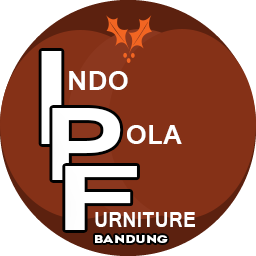
<style>
.page{position:relative;width:256px;height:256px;background:#853117}
.page>*{position:absolute;margin:0}
.t1{font:144.7px "Latha-Bold";color:#ffffff;scale:1.12 1}
.t2{font:30px "Latha-Bold";color:#ffffff}
.t3{font:111.7px "Latha-Bold";color:#ffffff;scale:1.21 1}
.t4{font:98.6px "Latha-Bold";color:#ffffff;scale:1.62 1}
.t5{font:23.8px "Latha-Bold";color:#ffffff;scale:0.88 1}
.t6{font:10.8px "Intro";color:#ffffff;scale:1.32 1}
</style>
<div class="page">
<p class="t1" style="left:41px;top:51px;width:21px;height:93px">I</p>
<p class="t2" style="left:69px;top:71px;width:59px;height:19px">NDO</p>
<p class="t3" style="left:52px;top:108px;width:69px;height:72px">P</p>
<p class="t2" style="left:127px;top:125px;width:55px;height:19px">OLA</p>
<p class="t4" style="left:65px;top:166px;width:72px;height:64px">F</p>
<p class="t5" style="left:95px;top:212px;width:100px;height:15px">URNITURE</p>
<p class="t6" style="left:95px;top:235px;width:73px;height:8px">BANDUNG</p>
</div>
